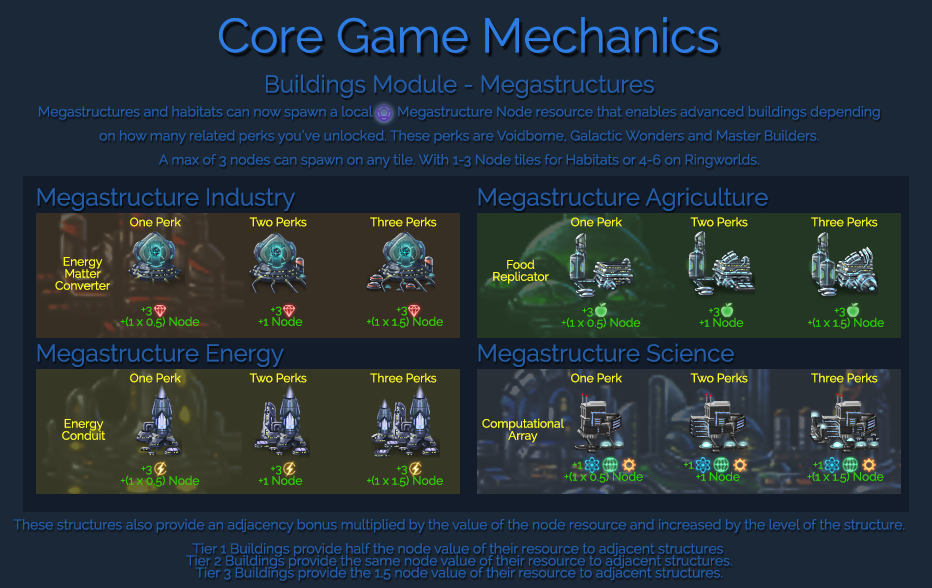
<style>
.page{position:relative;width:932px;height:588px;background:#1b2838}
.page>*{position:absolute;margin:0}
.t1{font:48px "Raleway";color:#2d7de4}
.t2{font:14px/12px "Raleway";color:#245ea9}
.t3{font:24px/12px "Raleway";color:#245ea9}
.t4{font:24px "Raleway";color:#245ea9}
.t5{font:12px "Raleway";color:#fffc21}
.t6{font:12px/12px "Raleway";color:#fffc21}
.t7{font:12px/12px "Raleway";color:#31cf00}
.t8{font:6px/12px "Raleway";color:#245ea9}
</style>
<div class="page">
<p class="t1" style="left:219px;top:17px;width:499px;height:36px">Core Game Mechanics</p>
<p class="t2" style="left:39px;top:74px;width:841px;height:94px;text-align:center"><span class="t3">Buildings Module - Megastructures<br><br></span>Megastructures and habitats can now spawn a local       Megastructure Node resource that enables advanced buildings depending<br><br>on how many related perks you’ve unlocked. These perks are Voidborne, Galactic Wonders and Master Builders.<br><br>A max of 3 nodes can spawn on any tile. With 1-3 Node tiles for Habitats or 4-6 on Ringworlds.</p>
<p class="t4" style="left:37px;top:187px;width:258px;height:24px">Megastructure Industry</p>
<p class="t4" style="left:478px;top:187px;width:290px;height:24px">Megastructure Agriculture</p>
<p class="t5" style="left:130px;top:217px;width:307px;height:10px">One Perk      Two Perks          Three Perks</p>
<p class="t5" style="left:571px;top:217px;width:307px;height:10px">One Perk      Two Perks          Three Perks</p>
<p class="t6" style="left:55px;top:257px;width:55px;height:33px;text-align:center">Energy <br>Matter <br>Converter</p>
<p class="t6" style="left:493px;top:259px;width:56px;height:25px;text-align:center">Food<br>Replicator</p>
<p class="t7" style="left:120px;top:306px;width:323px;height:22px">+3          +3         +3 <br>     +(1 x 0.5) Node             +1 Node     +(1 x 1.5) Node</p>
<p class="t7" style="left:561px;top:307px;width:323px;height:22px">+3         +3        +3 <br>     +(1 x 0.5) Node             +1 Node     +(1 x 1.5) Node</p>
<p class="t4" style="left:37px;top:344px;width:247px;height:23px">Megastructure Energy</p>
<p class="t4" style="left:478px;top:343px;width:256px;height:24px">Megastructure Science</p>
<p class="t5" style="left:130px;top:373px;width:307px;height:10px">One Perk      Two Perks          Three Perks</p>
<p class="t5" style="left:571px;top:373px;width:307px;height:10px">One Perk      Two Perks          Three Perks</p>
<p class="t6" style="left:62px;top:419px;width:44px;height:21px;text-align:center">Energy<br>Conduit</p>
<p class="t6" style="left:482px;top:418px;width:82px;height:25px;text-align:center">Computational Array</p>
<p class="t7" style="left:564px;top:461px;width:320px;height:22px">+1    +1               +1 <br>         +(1 x 0.5) Node               +1 Node        +(1 x 1.5) Node</p>
<p class="t7" style="left:120px;top:465px;width:323px;height:22px">+3          +3         +3 <br>     +(1 x 0.5) Node             +1 Node     +(1 x 1.5) Node</p>
<p class="t2" style="left:13px;top:519px;width:892px;height:62px;text-align:center"><span class="t3"><br></span>These structures also provide an adjacency bonus multiplied by the value of the node resource and increased by the level of the structure.<br><br>Tier 1 Buildings provide half the node value of their resource to adjacent structures<span class="t8"> .<br></span>Tier 2 Buildings provide the same node value of their resource to adjacent structures.<br>Tier 3 Buildings provide the 1.5 node value of their resource to adjacent structures.</p>
</div>
